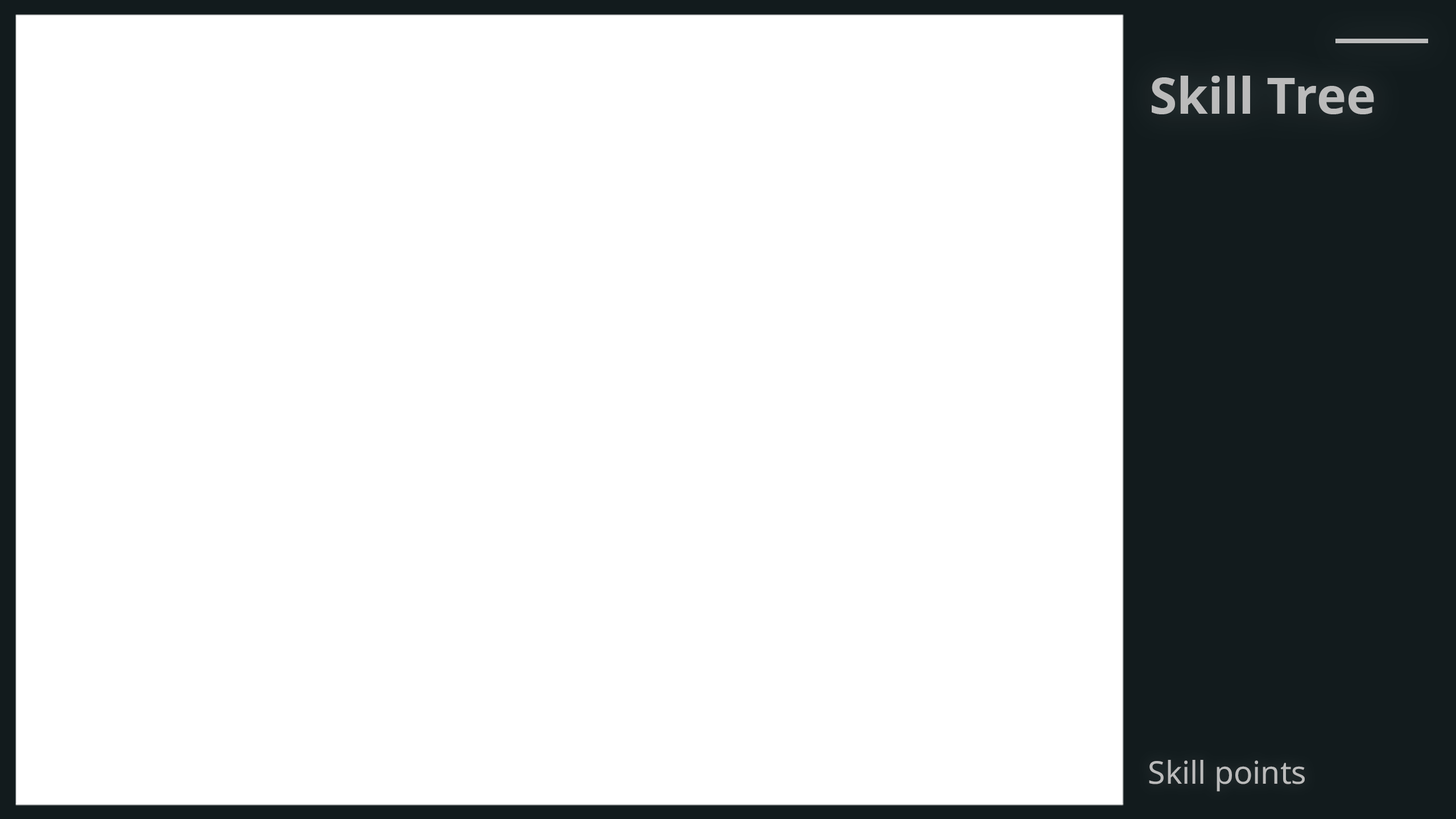
<style>
.page{position:relative;width:1456px;height:819px;background:#ffffff}
.page>*{position:absolute;margin:0}
.t1{font:50px "NotoSans-Bold";color:#bbbbbb}
.t2{font:31.4px "NotoSans";color:#bbbbbb}
</style>
<div class="page">
<p class="t1" style="left:1152px;top:76px;width:222px;height:38px">Skill Tree</p>
<p class="t2" style="left:1149px;top:760px;width:156px;height:32px">Skill points</p>
</div>
